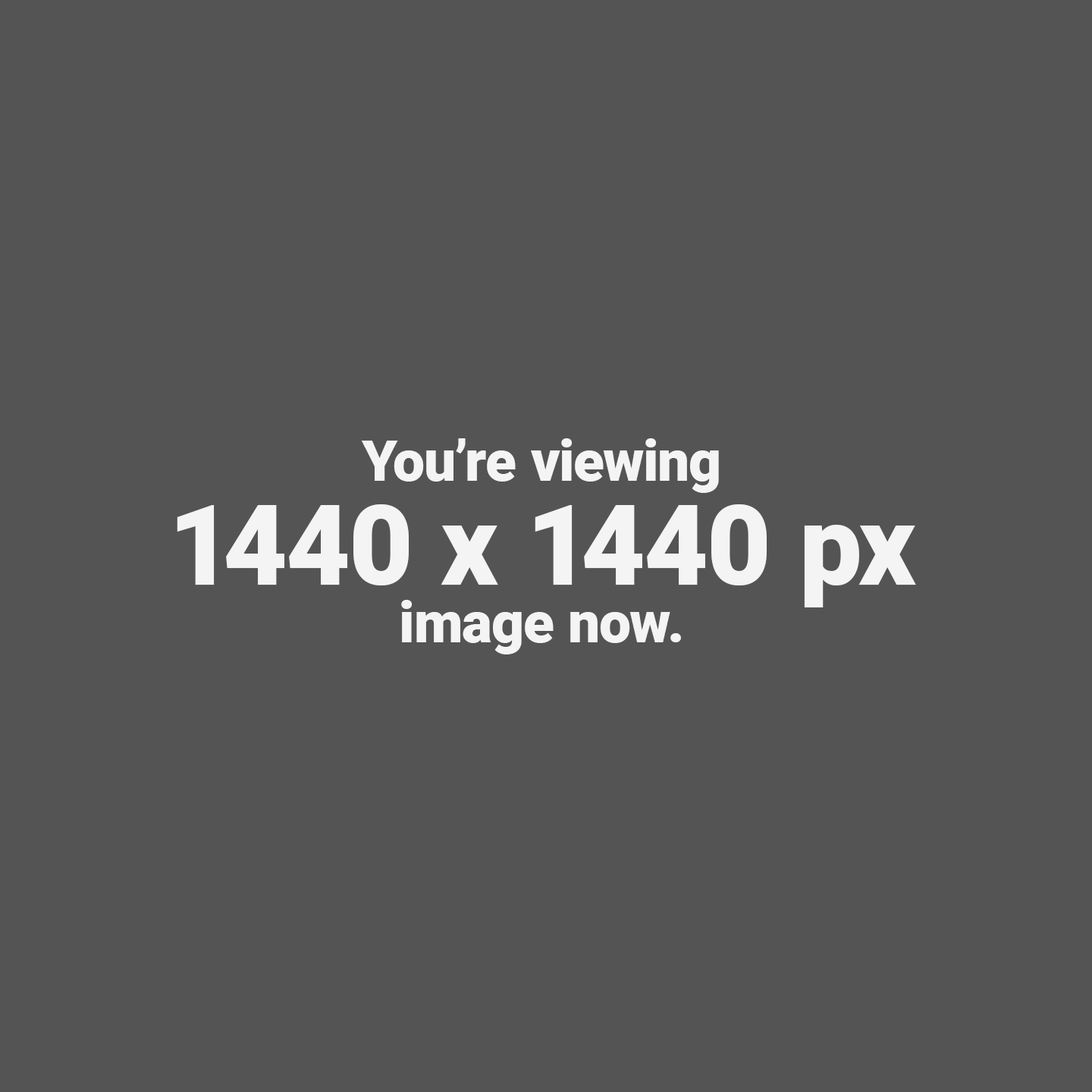
<style>
.page{position:relative;width:1092px;height:1092px;background:#545454}
.page>*{position:absolute;margin:0}
.t1{font:56.9px/56.9px "Roboto-Black";color:#f4f4f4}
.t2{font:111.5px/104.6px "Roboto-Black";color:#f4f4f4}
.t3{font:56.9px/104.6px "Roboto-Black";color:#f4f4f4}
</style>
<div class="page">
<p class="t1" style="left:177px;top:438px;width:739px;height:216px;text-align:center">You’re viewing<br><span class="t2">1440 x 1440 px<br></span><span class="t3">image now.</span></p>
</div>
